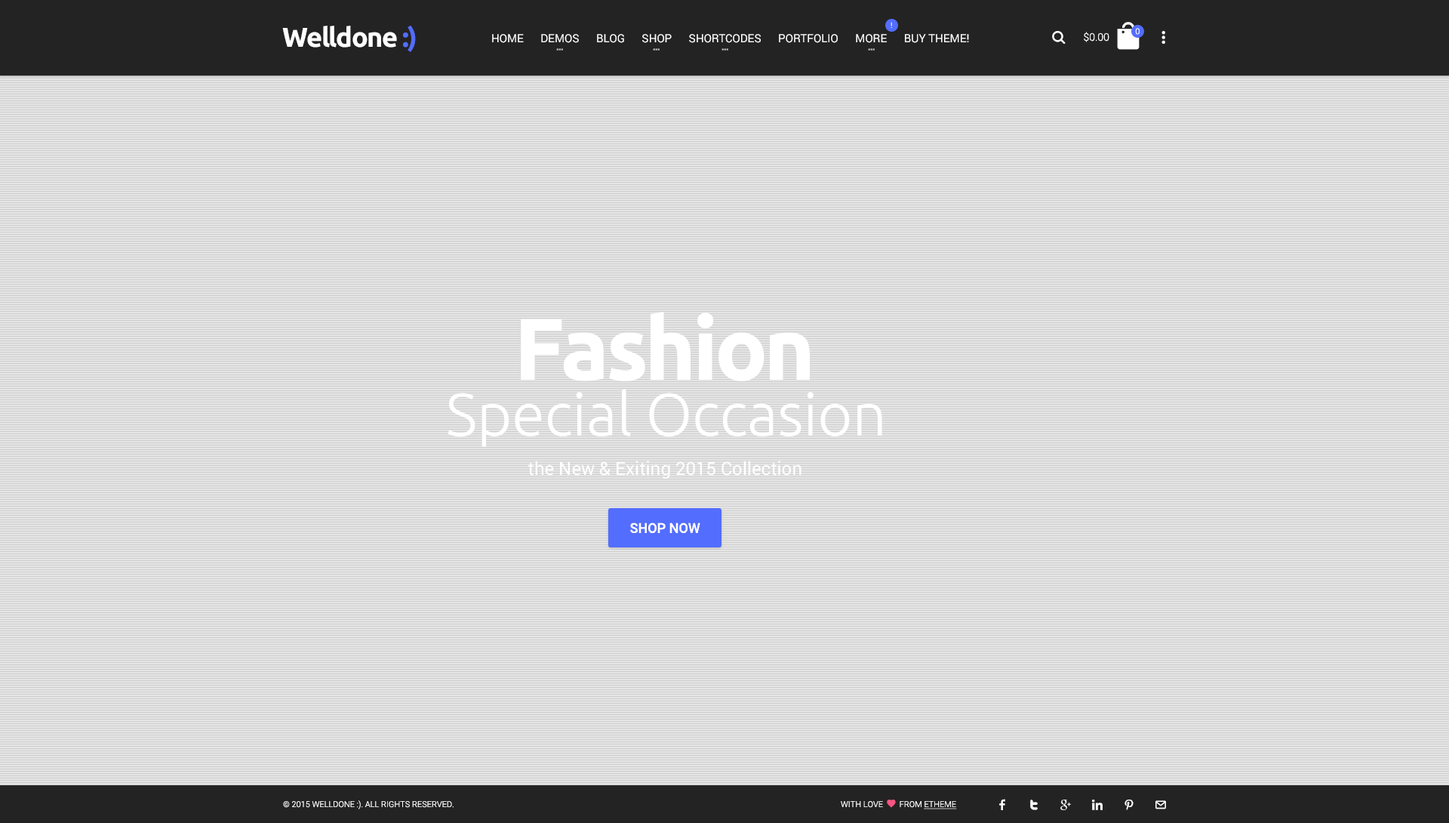
<style>
.page{position:relative;width:1449px;height:823px}
.page>*{position:absolute;margin:0}
.t1{font:27.2px "Ubuntu-Bold";letter-spacing:-0.04em;color:#ffffff}
.t2{font:27.2px "Ubuntu-Bold";letter-spacing:-0.04em;color:#536dfe}
.t3{font:7.5px "Roboto-Regular"}
.t4{font:8.3px "Roboto-Light";color:#ffffff}
.t5{font:11.3px "Roboto-Regular";color:#fffefe}
.t6{font:10.6px "Roboto-Light";color:#ffffff}
.t7{font:87.4px "Ubuntu-Bold";letter-spacing:-0.04em;color:#ffffff}
.t8{font:59.8px "Ubuntu-Light";color:#ffffff}
.t9{font:18.1px "Roboto-Regular";color:#ffffff}
.t10{font:13.6px "Roboto-Medium";color:#ffffff;text-transform:uppercase}
.t11{font:8.3px "Roboto-Light";color:#ffffff;text-transform:uppercase}
</style>
<div class="page">
<p class="t1" style="left:282px;top:25px;width:134px;height:27px">Welldone <span class="t2">:)</span></p>
<p class="t3" style="left:891px;top:22px;width:1px;height:6px">!</p>
<p class="t4" style="left:1135px;top:28px;width:5px;height:7px">0</p>
<p class="t5" style="left:492px;top:34px;width:477px;height:9px">HOME      DEMOS      BLOG      SHOP      SHORTCODES      PORTFOLIO      MORE      BUY THEME!</p>
<p class="t6" style="left:1084px;top:32px;width:26px;height:10px">$0.00</p>
<p class="t7" style="left:521px;top:312px;width:289px;height:69px">Fashion</p>
<p class="t8" style="left:448px;top:389px;width:434px;height:58px">Special Occasion</p>
<p class="t9" style="left:528px;top:460px;width:274px;height:19px">the New &amp; Exiting 2015 Collection</p>
<p class="t10" style="left:630px;top:522px;width:70px;height:11px">SHOP NOW</p>
<p class="t11" style="left:283px;top:800px;width:171px;height:9px">© 2015 Welldone :). All Rights Reserved.</p>
</div>
